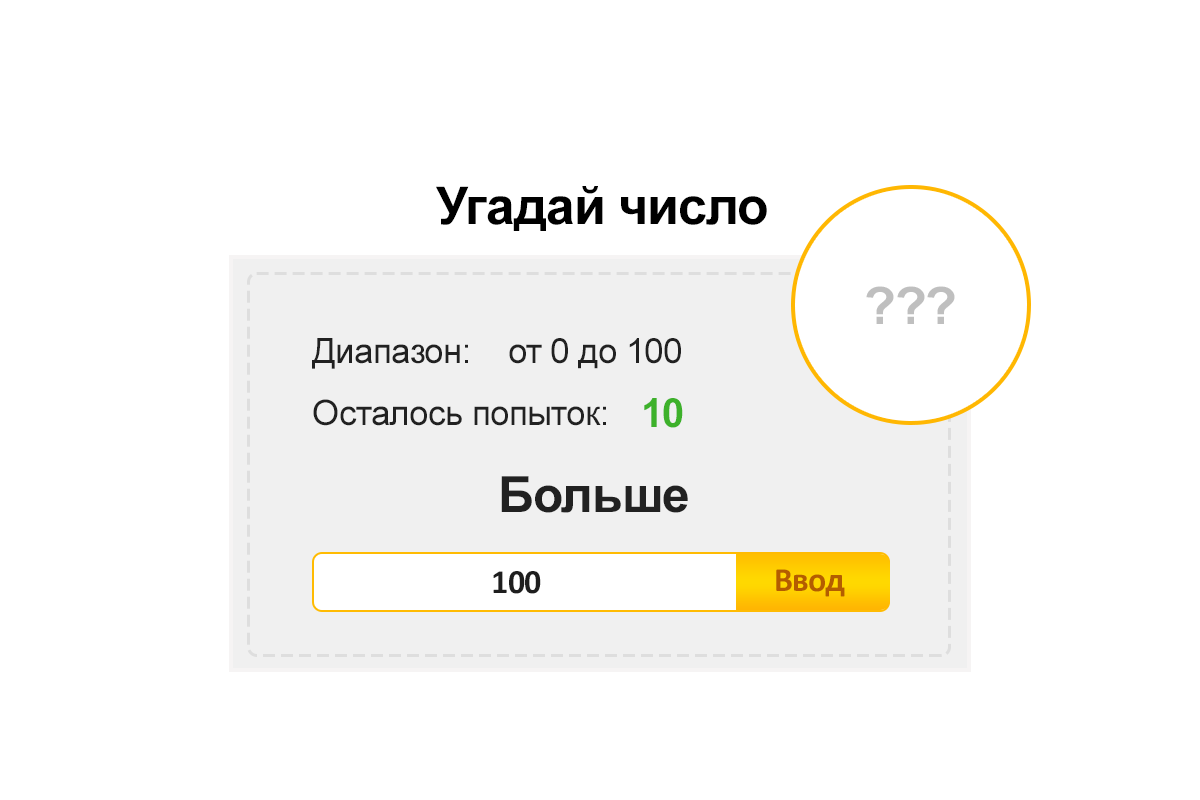
<style>
.page{position:relative;width:1200px;height:800px;background:#ffffff}
.page>*{position:absolute;margin:0}
.t1{font:52px "Arial-BoldMT";letter-spacing:-0.02em;color:#000000}
.t2{font:52px "Arial-BoldMT";letter-spacing:-0.02em;color:#bfbfbf}
.t3{font:35px "ArialMT";letter-spacing:-0.02em;color:#212121}
.t4{font:40px "Arial-BoldMT";letter-spacing:-0.02em;color:#3db12a}
.t5{font:50px "Arial-BoldMT";letter-spacing:-0.02em;color:#212121}
.t6{font:34px "Calibri-Bold";letter-spacing:-0.02em;color:#b45d00}
.t7{font:34px "Calibri-Bold";letter-spacing:-0.02em;color:#1e1e1e}
</style>
<div class="page">
<p class="t1" style="left:436px;top:186px;width:331px;height:45px">Угадай число</p>
<p class="t2" style="left:866px;top:286px;width:89px;height:38px">???</p>
<p class="t3" style="left:312px;top:338px;width:156px;height:31px">Диапазон:</p>
<p class="t3" style="left:509px;top:338px;width:172px;height:31px">от 0 до 100</p>
<p class="t3" style="left:313px;top:399px;width:293px;height:27px">Осталось попыток:</p>
<p class="t4" style="left:644px;top:398px;width:39px;height:30px">10</p>
<p class="t5" style="left:501px;top:476px;width:187px;height:37px">Больше</p>
<p class="t6" style="left:776px;top:569px;width:69px;height:28px">Ввод</p>
<p class="t7" style="left:493px;top:571px;width:48px;height:23px">100</p>
</div>
